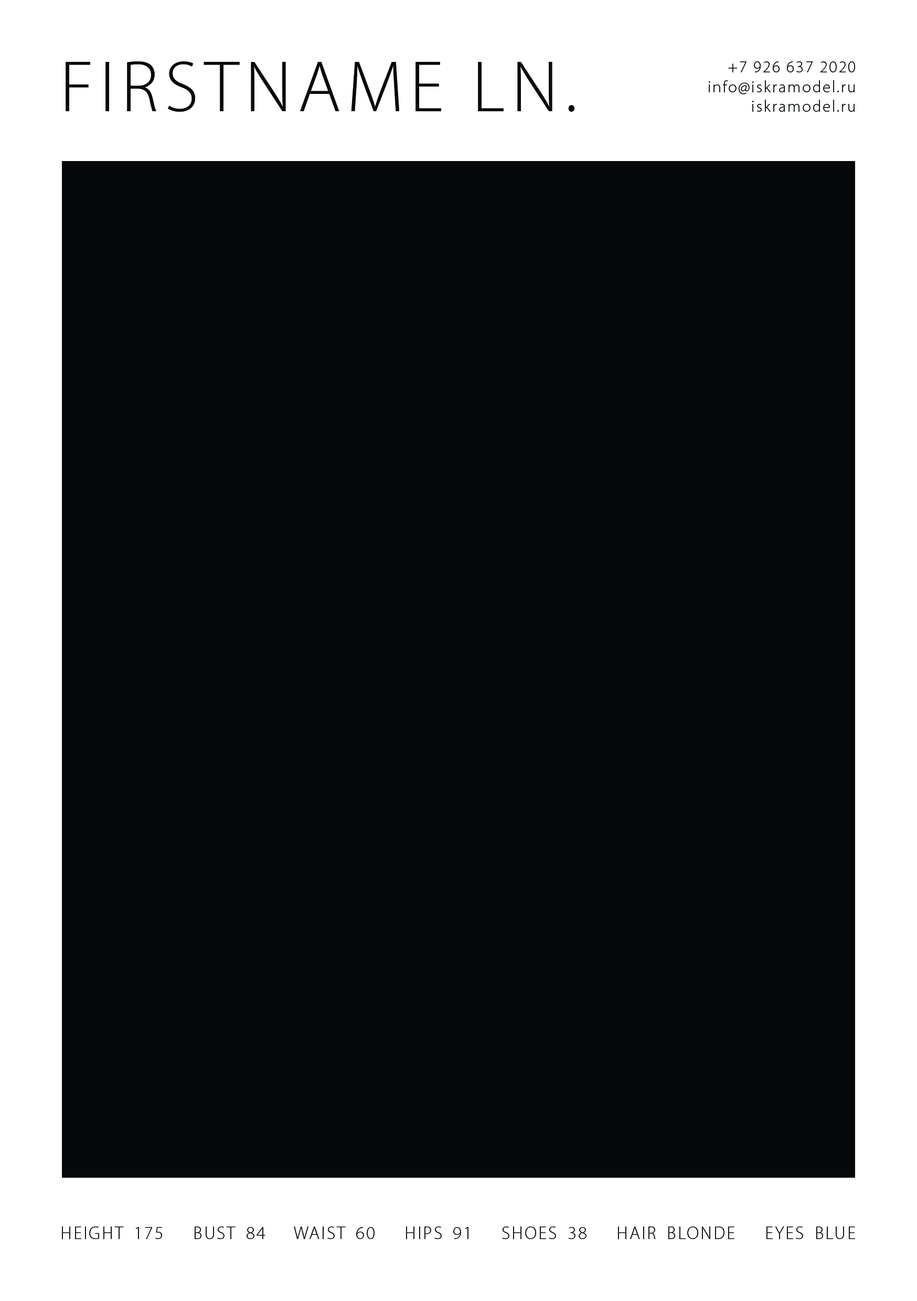
<style>
.page{position:relative;width:917px;height:1301px;background:#060809}
.page>*{position:absolute;margin:0}
.t1{font:73.2px "MyriadPro-Light";letter-spacing:0.085em;color:#000000}
.t2{font:16.4px "MyriadPro-Light";letter-spacing:0.085em;color:#050708}
.t3{font:18.1px "MyriadPro-Light";letter-spacing:0.085em;color:#000000}
</style>
<div class="page">
<p class="t1" style="left:66px;top:61px;width:508px;height:51px">FIRSTNAME LN.</p>
<p class="t2" style="left:709px;top:61px;width:146px;height:51px;text-align:right">+7 926 637 2020<br>info@iskramodel.ru<br>iskramodel.ru</p>
<p class="t3" style="left:62px;top:1226px;width:793px;height:13px">HEIGHT 175   BUST 84   WAIST 60   HIPS 91   SHOES 38   HAIR BLONDE   EYES BLUE</p>
</div>
